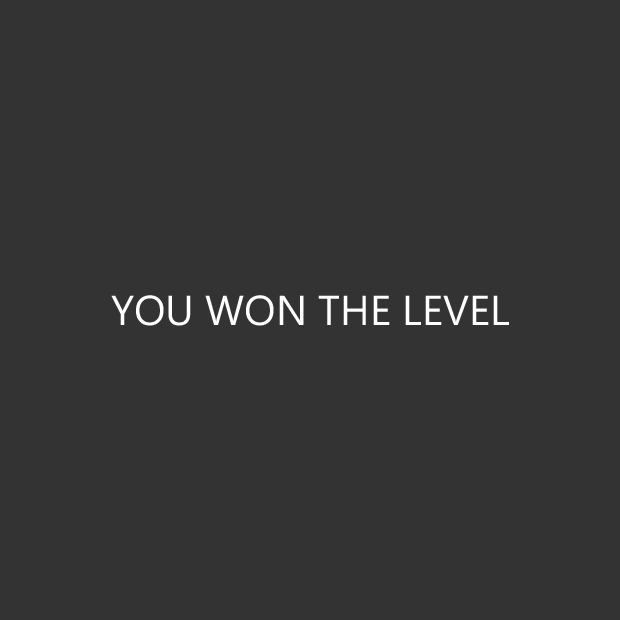
<style>
.page{position:relative;width:620px;height:620px;background:#333333}
.page>*{position:absolute;margin:0}
.t1{font:41.7px "MicrosoftPhagsPa";color:#ffffff}
</style>
<div class="page">
<p class="t1" style="left:111px;top:295px;width:398px;height:31px">YOU WON THE LEVEL</p>
</div>
